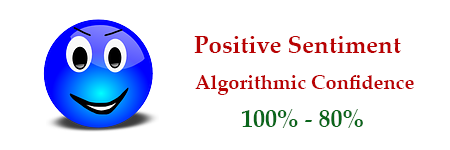
<style>
.page{position:relative;width:450px;height:150px;background:#ffffff}
.page>*{position:absolute;margin:0}
.t1{font:24px "PalatinoLinotype-Bold";color:#b90203}
.t2{font:20px "PalatinoLinotype-Bold";color:#b90203}
.t3{font:24px "PalatinoLinotype-Bold";color:#0a661b}
</style>
<div class="page">
<p class="t1" style="left:194px;top:36px;width:207px;height:17px">Positive Sentiment</p>
<p class="t2" style="left:195px;top:75px;width:219px;height:20px"><span class="t1"><br></span>Algorithmic Confidence</p>
<p class="t3" style="left:241px;top:109px;width:122px;height:19px"><span class="t2"><br></span>100% - 80%</p>
</div>
